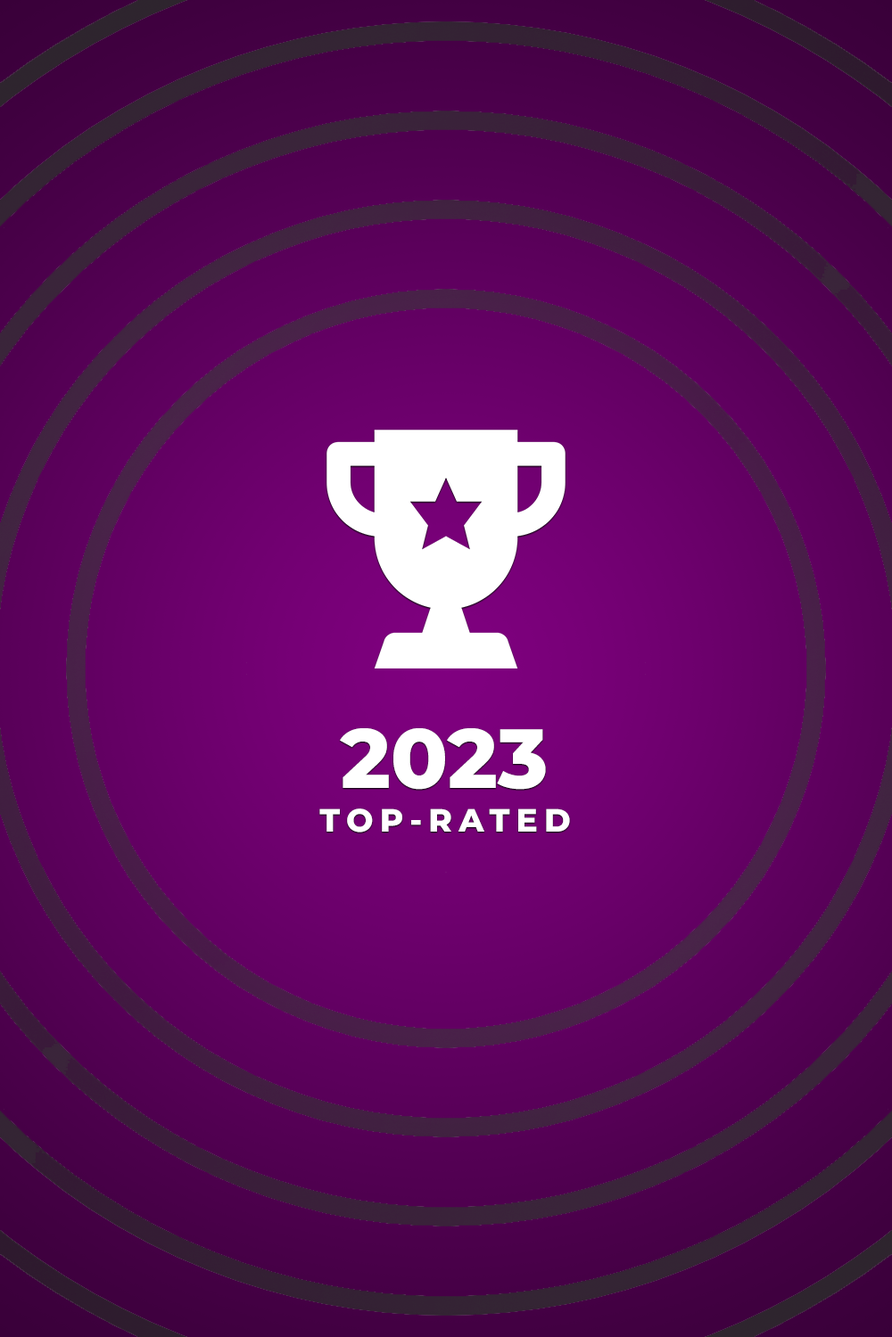
<style>
.page{position:relative;width:892px;height:1337px}
.page>*{position:absolute;margin:0}
.t1{font:83.8px "MontserratRoman-ExtraBold";color:#ffffff}
.t2{font:32.1px "MontserratRoman-ExtraBold";letter-spacing:0.2em;color:#ffffff}
</style>
<div class="page">
<p class="t1" style="left:340px;top:728px;width:206px;height:62px">2023</p>
<p class="t2" style="left:319px;top:809px;width:251px;height:24px">TOP-RATED</p>
</div>
